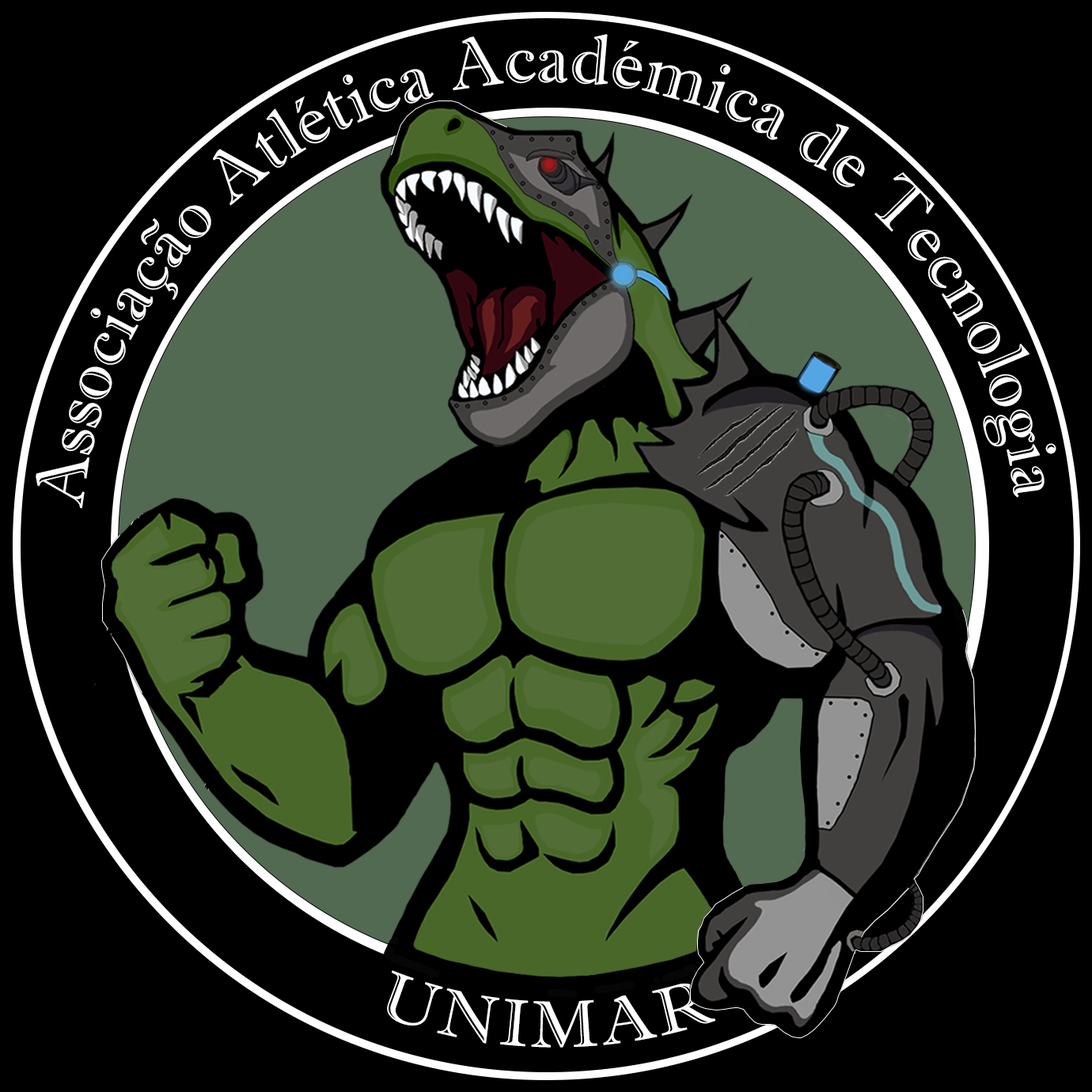
<style>
.page{position:relative;width:1092px;height:1092px;background:#000000}
.page>*{position:absolute;margin:0}
.t1{font:71.9px "ImprintMT-Shadow";color:#ffffff}
.t2{font:65.9px "ImprintMT-Shadow";letter-spacing:0.005em;color:#ffffff;font-weight:bold}
</style>
<div class="page">
<p class="t1" style="left:36px;top:34px;width:1020px;height:475px;rotate:-99deg">Associação Atlética Académica de Tecnologia</p>
<p class="t2" style="left:387px;top:970px;width:329px;height:78px;rotate:1deg">UNIMAR</p>
</div>
